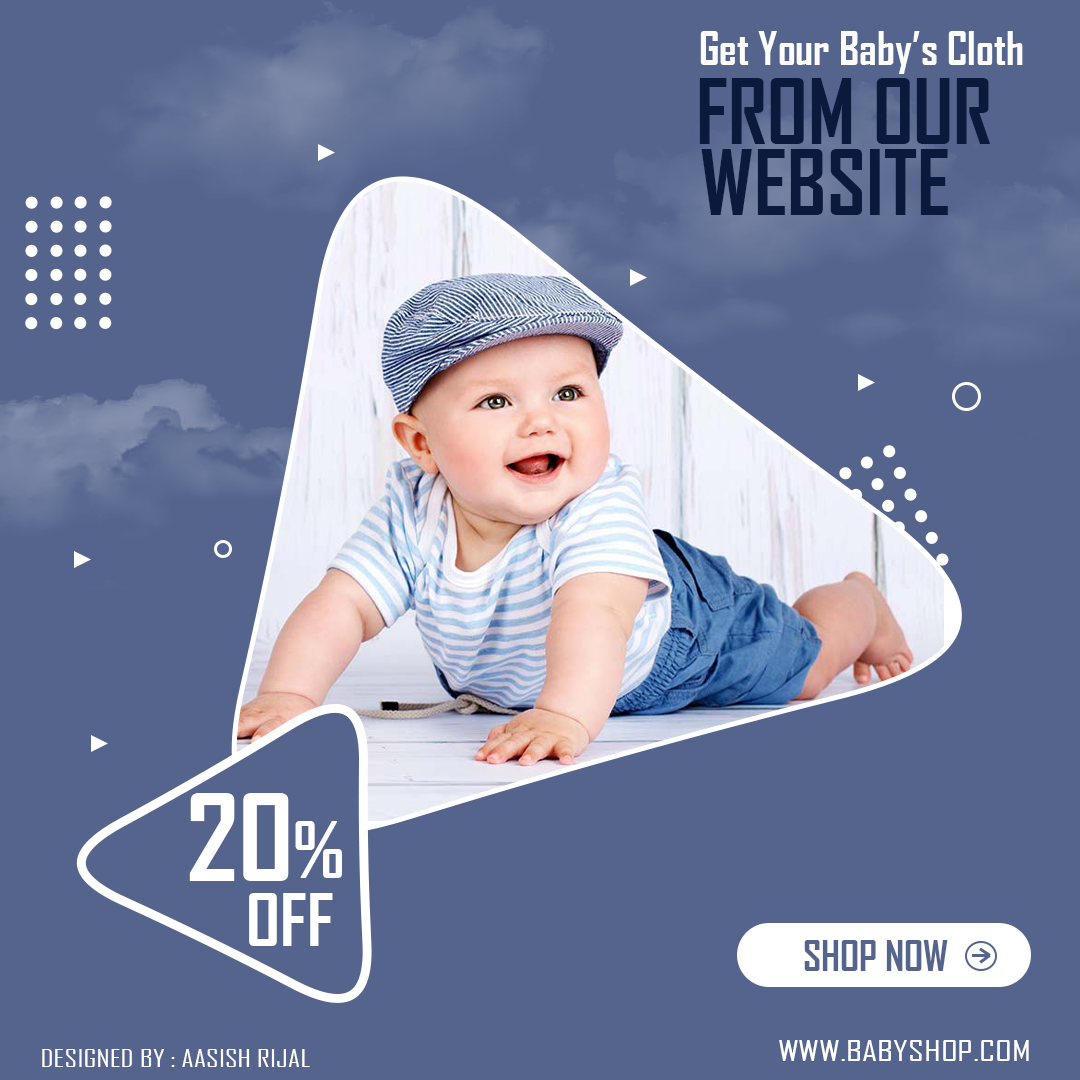
<style>
.page{position:relative;width:1080px;height:1080px;background:#54648d}
.page>*{position:absolute;margin:0}
.t1{font:44.4px "AgencyFB-Bold";color:#fcfcfc}
.t2{font:85.8px "AgencyFB-Bold";color:#0b193c}
.t3{font:114.5px "AgencyFB-Bold";color:#ffffff;scale:1.04 1}
.t4{font:73.5px "AgencyFB-Bold";color:#ffffff;scale:1.04 1}
.t5{font:68.9px "AgencyFB-Bold";color:#ffffff;scale:1.04 1}
.t6{font:40.4px "AgencyFB-Bold";color:#54648d}
.t7{font:24.2px "AgencyFB-Reg";color:#fefeff;scale:1.26 1}
.t8{font:28px "AgencyFB-Reg";color:#ffffff;scale:1.35 1}
</style>
<div class="page">
<p class="t1" style="left:700px;top:31px;width:323px;height:43px">Get Your Baby’s Cloth</p>
<p class="t2" style="left:699px;top:78px;width:291px;height:66px">FROM OUR</p>
<p class="t2" style="left:701px;top:149px;width:247px;height:66px">WEBSITE</p>
<p class="t3" style="left:189px;top:793px;width:100px;height:88px">20</p>
<p class="t4" style="left:295px;top:821px;width:47px;height:57px">%</p>
<p class="t5" style="left:249px;top:893px;width:84px;height:53px">OFF</p>
<p class="t6" style="left:804px;top:940px;width:144px;height:31px">SHOP NOW</p>
<p class="t7" style="left:42px;top:1049px;width:268px;height:18px">DESIGNED BY : AASISH RIJAL</p>
<p class="t8" style="left:779px;top:1040px;width:250px;height:21px">WWW.BABYSHOP.COM</p>
</div>
